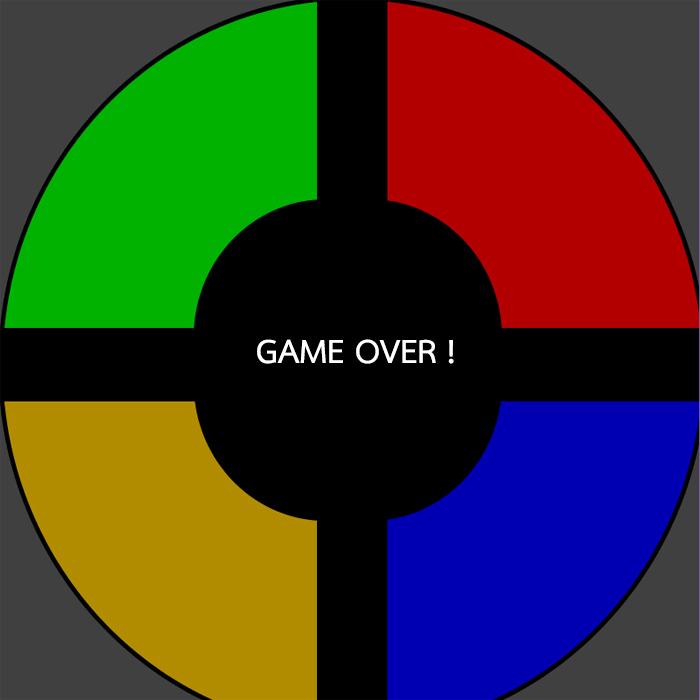
<style>
.page{position:relative;width:700px;height:700px;background:#000000}
.page>*{position:absolute;margin:0}
.t1{font:48px "THSarabunNew-Bold";color:#ffffff}
</style>
<div class="page">
<p class="t1" style="left:257px;top:339px;width:197px;height:25px">GAME OVER !</p>
</div>
